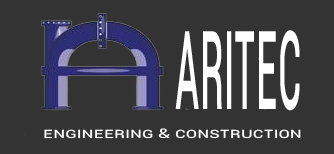
<style>
.page{position:relative;width:334px;height:154px;background:#333333}
.page>*{position:absolute;margin:0}
.t1{font:136.7px "Roboto-Regular";color:#ffffff;font-variant:small-caps;scale:0.3 1}
.t2{font:14.2px "Roboto-Regular";color:#ffffff;font-variant:small-caps;scale:1.34 1}
</style>
<div class="page">
<p class="t1" style="left:175px;top:30px;width:125px;height:81px">ARITEC</p>
<p class="t2" style="left:44px;top:128px;width:257px;height:11px">Engineering &amp; Construction</p>
</div>
